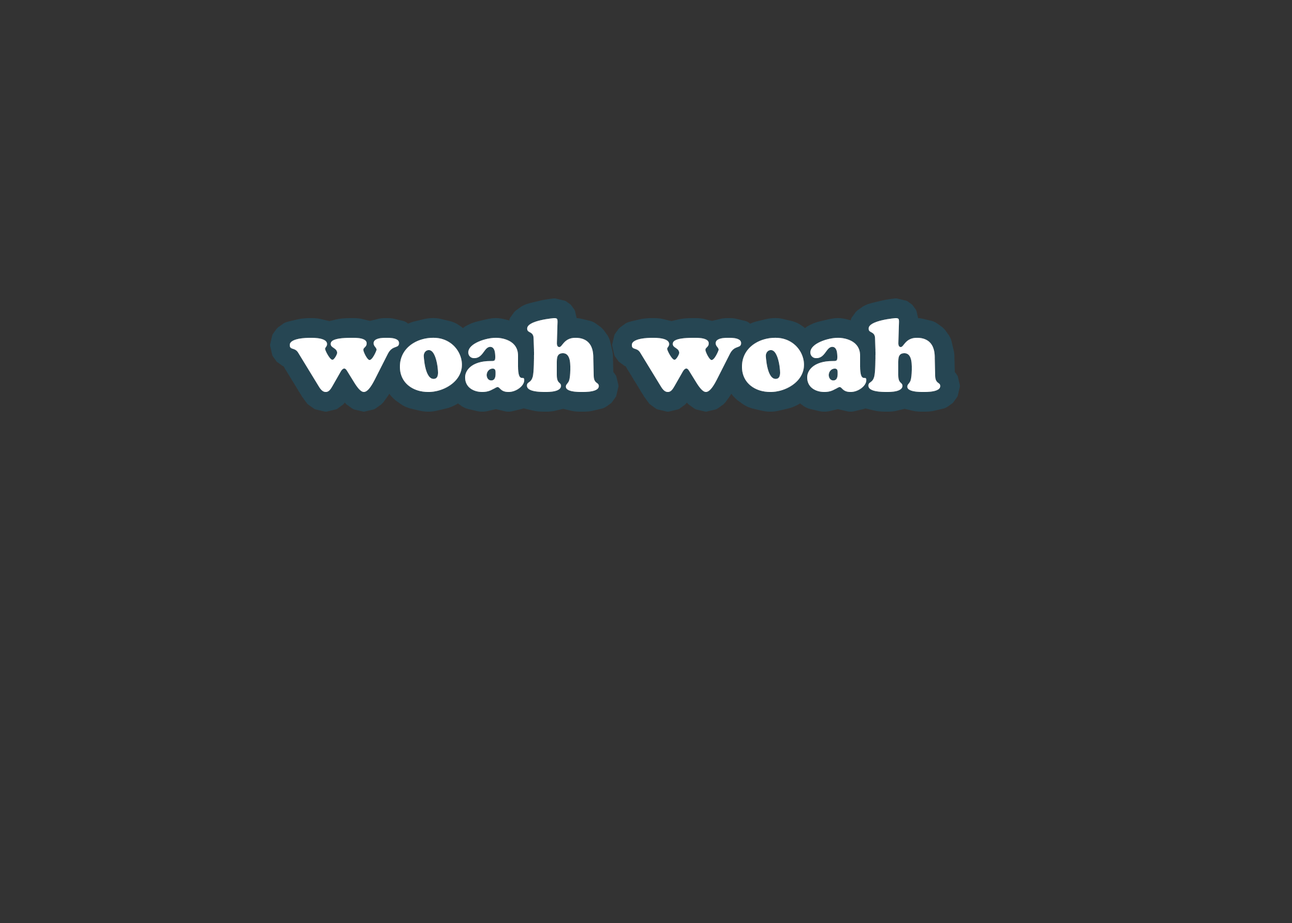
<style>
.page{position:relative;width:1292px;height:923px;background:#333333}
.page>*{position:absolute;margin:0}
.t1{font:103.7px "CooperBlackStd";color:#ffffff}
</style>
<div class="page">
<p class="t1" style="left:290px;top:318px;width:651px;height:74px">woah woah</p>
</div>
